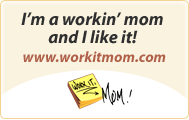
<style>
.page{position:relative;width:189px;height:120px;background:#faf3e0}
.page>*{position:absolute;margin:0}
.t1{font:18px/18px "MyriadPro-BoldIt";color:#2f2f2f}
.t2{font:15px "MyriadPro-BoldIt";color:#b06049}
</style>
<div class="page">
<p class="t1" style="left:21px;top:12px;width:142px;height:32px;text-align:center">I’m a workin’ mom and I like it!</p>
<p class="t2" style="left:23px;top:51px;width:143px;height:11px">www.workitmom.com</p>
</div>
